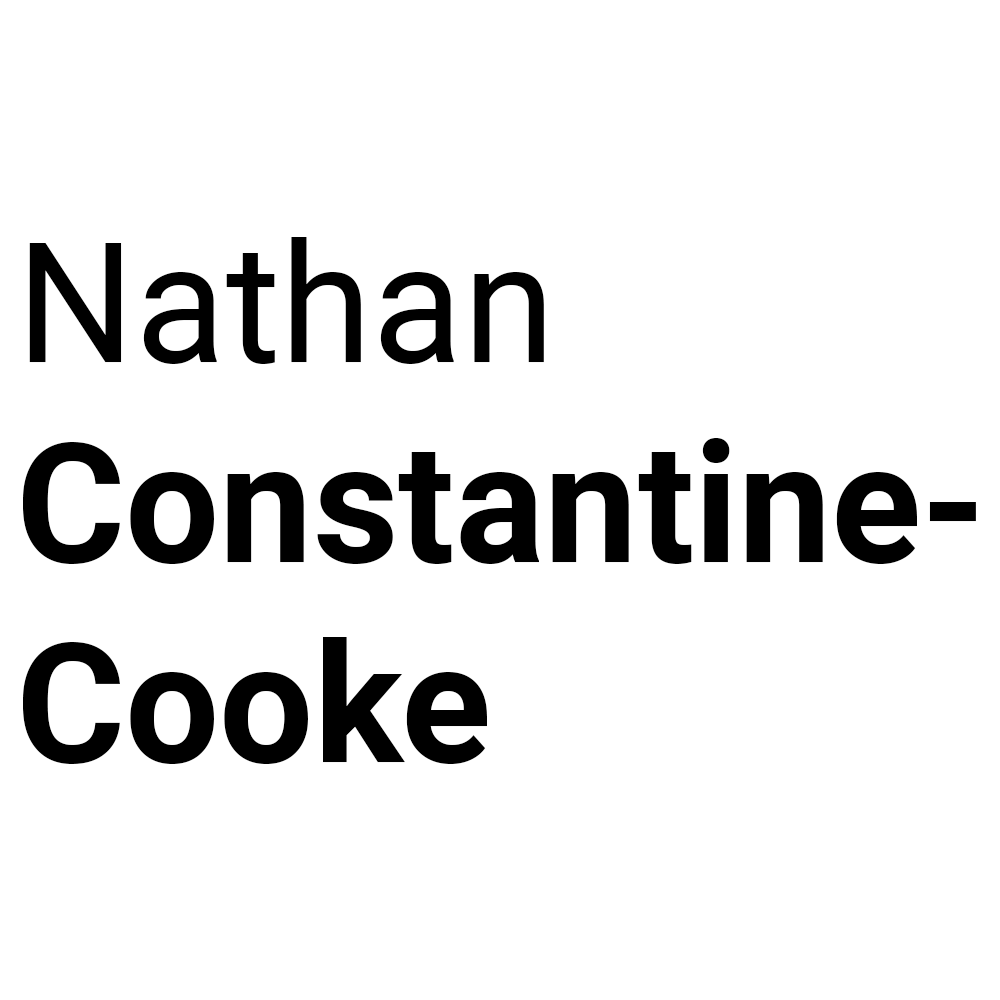
<style>
.page{position:relative;width:1000px;height:1000px;background:#ffffff}
.page>*{position:absolute;margin:0}
.t1{font:166.7px "Roboto-Bold";color:#000000}
.t2{font:166.7px "Roboto-Regular";color:#000000}
</style>
<div class="page">
<p class="t1" style="left:23px;top:237px;width:953px;height:527px"><span class="t2">Nathan<br></span>Constantine-<br>Cooke</p>
</div>
